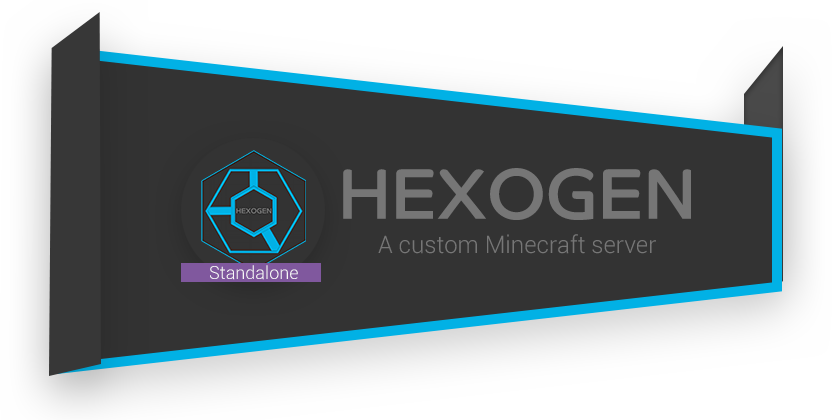
<style>
.page{position:relative;width:840px;height:420px;background:#333333}
.page>*{position:absolute;margin:0}
.t1{font:72px "CoHeadlineCorp-Regular";color:#767676}
.t2{font:24px "Roboto-Light";color:#767676}
.t3{font:18px "Roboto-Light";color:#f8f8f8}
</style>
<div class="page">
<p class="t1" style="left:343px;top:168px;width:348px;height:52px">HEXOGEN</p>
<p class="t2" style="left:378px;top:234px;width:278px;height:20px">A custom Minecraft server</p>
<p class="t3" style="left:210px;top:265px;width:88px;height:15px">Standalone</p>
</div>
